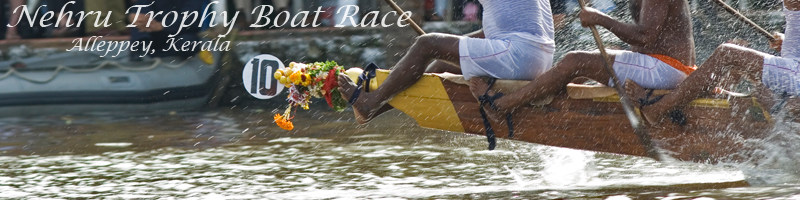
<style>
.page{position:relative;width:800px;height:200px}
.page>*{position:absolute;margin:0}
.t1{font:30px/8px "LucidaCalligraphy-Italic";color:#dedfdf;font-style:italic}
.t2{font:18px/8px "LucidaCalligraphy-Italic";color:#dedfdf;font-style:italic}
</style>
<div class="page">
<p class="t1" style="left:6px;top:1px;width:406px;height:56px">Nehru Trophy Boat Race<br><br><br><span class="t2">          Alleppey, Kerala</span></p>
</div>
